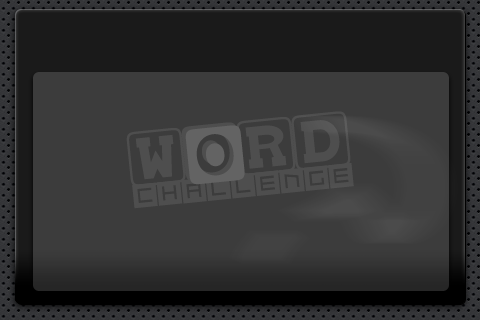
<style>
.page{position:relative;width:480px;height:320px;background:#3c3c3c}
.page>*{position:absolute;margin:0}
.t1{font:46px "babybloc";color:#4e4e4e}
.t2{font:46px "babybloc";color:#636363}
.t3{font:36px "Qubix";color:#4e4e4e}
</style>
<div class="page">
<p class="t1" style="left:126px;top:111px;width:225px;height:76px;rotate:-6deg">WoRD</p>
<p class="t2" style="left:185px;top:125px;width:60px;height:60px;rotate:-6deg">o</p>
<p class="t3" style="left:132px;top:163px;width:222px;height:46px;rotate:-6deg">Challenge</p>
</div>
